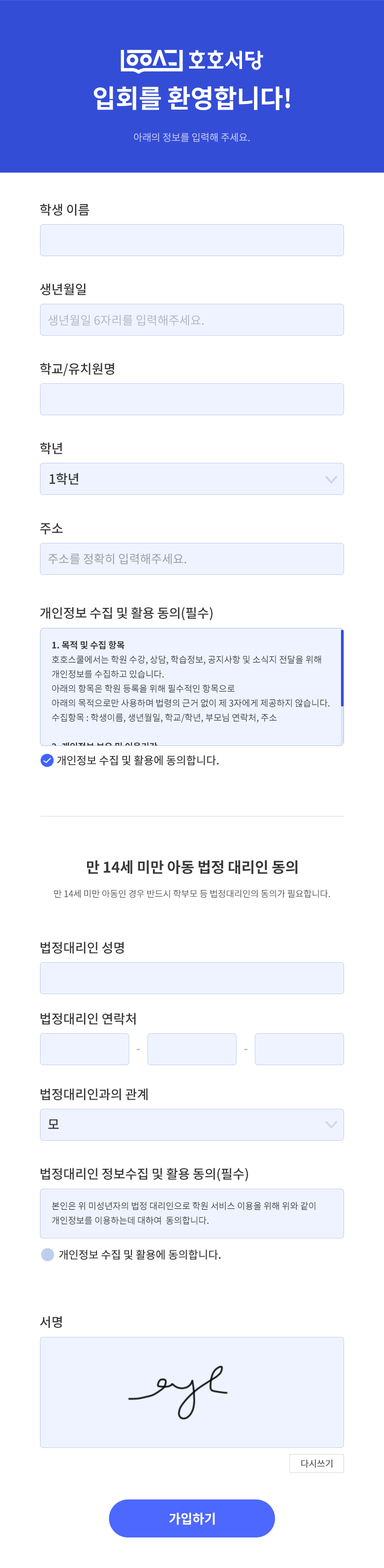
<style>
.page{position:relative;width:384px;height:1568px;background:#ffffff}
.page>*{position:absolute;margin:0}
.t1{font:25.6px "NotoSansCJKkr-Bold";letter-spacing:-0.01em;color:#ffffff}
.t2{font:10px "NotoSansCJKkr-Regular";letter-spacing:-0.01em;color:#c9cef2}
.t3{font:13px "NotoSansCJKkr-Medium";letter-spacing:-0.01em;color:#383838}
.t4{font:12px "NotoSansCJKkr-Regular";letter-spacing:-0.01em;color:#adb4c4}
.t5{font:12px "NotoSansCJKkr-Regular";letter-spacing:-0.01em;color:#96989f}
.t6{font:9px/14.5px "NotoSansCJKkr-Regular";letter-spacing:-0.01em;color:#383838}
.t7{font:9px/14.5px "NotoSansCJKkr-Bold";letter-spacing:-0.01em;color:#383838}
.t8{font:11px "NotoSansCJKkr-Medium";letter-spacing:-0.01em;color:#383838}
.t9{font:14.9px "NotoSansCJKkr-Bold";letter-spacing:-0.01em;color:#383838}
.t10{font:9px "NotoSansCJKkr-DemiLight";letter-spacing:-0.01em;color:#383838}
.t11{font:13px "NotoSansCJKkr-Medium";letter-spacing:-0.01em;color:#b2b2b2}
.t12{font:9px "NotoSansCJKkr-Medium";letter-spacing:-0.01em;color:#595959}
.t13{font:13px "NotoSansCJKkr-Bold";color:#ffffff}
</style>
<div class="page">
<p class="t1" style="left:94px;top:86px;width:196px;height:24px">입회를 환영합니다!</p>
<p class="t2" style="left:134px;top:133px;width:116px;height:9px">아래의 정보를 입력해 주세요.</p>
<p class="t3" style="left:40px;top:204px;width:50px;height:12px">학생 이름</p>
<p class="t3" style="left:40px;top:283px;width:46px;height:12px">생년월일</p>
<p class="t4" style="left:48px;top:315px;width:156px;height:11px">생년월일 6자리를 입력해주세요.</p>
<p class="t3" style="left:40px;top:363px;width:75px;height:13px">학교/유치원명명</p>
<p class="t3" style="left:40px;top:442px;width:22px;height:12px">학년명</p>
<p class="t3" style="left:50px;top:473px;width:29px;height:12px">1학년명</p>
<p class="t3" style="left:40px;top:523px;width:23px;height:12px">주소명</p>
<p class="t5" style="left:48px;top:553px;width:139px;height:11px">주소를 정확히 입력해주세요.</p>
<p class="t3" style="left:40px;top:607px;width:173px;height:13px">개인정보 수집 및 활용 동의(필수)명</p>
<p class="t6" style="left:52px;top:640px;width:278px;height:140px"><span class="t7">1. 목적 및 수집 항목<br></span>호호스쿨에서는 학원 수강, 상담, 학습정보, 공지사항 및 소식지 전달을 위해<br>개인정보를 수집하고 있습니다.<br>아래의 항목은 학원 등록을 위해 필수적인 항목으로<br>아래의 목적으로만 사용하며 법령의 근거 없이 제 3자에게 제공하지 않습니다.<br>수집항목 : 학생이름, 생년월일, 학교/학년, 부모님 연락처, 주소<br><br><span class="t7">2. 개인정보 보유 및 이용기간<br></span>- 수집된 개인정보는 학원 퇴원 후 6개월까지 보유하며 그 이후는 파기합니다.<br>- 정보 이용 동의를 철회할 경우 학원 수강중이라도 해당 정보는 삭제합니다.</p>
<p class="t8" style="left:57px;top:755px;width:162px;height:10px">개인정보 수집 및 활용에 동의합니다.명</p>
<p class="t9" style="left:87px;top:860px;width:211px;height:14px">만 14세 미만 아동 법정 대리인 동의명</p>
<p class="t10" style="left:54px;top:890px;width:276px;height:8px">만 14세 미만 아동인 경우 반드시 학부모 등 법정대리인의 동의가 필요합니다.명</p>
<p class="t3" style="left:41px;top:942px;width:83px;height:12px">법정대리인 성명명</p>
<p class="t3" style="left:41px;top:1013px;width:95px;height:12px">법정대리인 연락처명</p>
<p class="t11" style="left:137px;top:1049px;width:3px;height:1px">-명</p>
<p class="t11" style="left:244px;top:1049px;width:4px;height:1px">-명</p>
<p class="t3" style="left:41px;top:1088px;width:107px;height:12px">법정대리인과의 관계명</p>
<p class="t3" style="left:48px;top:1119px;width:11px;height:10px">모명</p>
<p class="t3" style="left:41px;top:1168px;width:207px;height:13px">법정대리인 정보수집 및 활용 동의(필수)명</p>
<p class="t6" style="left:52px;top:1202px;width:264px;height:23px">본인은 위 미성년자의 법정 대리인으로 학원 서비스 이용을 위해 위와 같이<br>개인정보를 이용하는데 대하여  동의합니다.</p>
<p class="t8" style="left:59px;top:1249px;width:162px;height:11px">개인정보 수집 및 활용에 동의합니다.명</p>
<p class="t3" style="left:40px;top:1316px;width:22px;height:12px">서명명</p>
<p class="t12" style="left:301px;top:1459px;width:32px;height:9px">다시쓰기</p>
<p class="t13" style="left:169px;top:1512px;width:46px;height:13px">가입하기</p>
</div>
